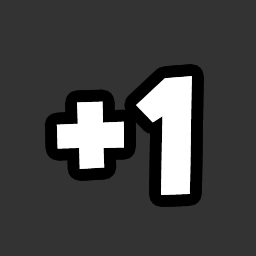
<style>
.page{position:relative;width:256px;height:256px;background:#333333}
.page>*{position:absolute;margin:0}
.t1{font:160px "KurriIslandPERSONAL-Bold";letter-spacing:0.1em;color:#ffffff}
</style>
<div class="page">
<p class="t1" style="left:56px;top:76px;width:136px;height:119px">+1</p>
</div>
